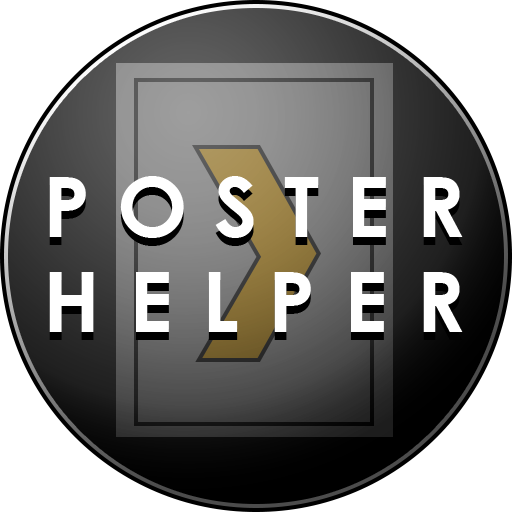
<style>
.page{position:relative;width:512px;height:512px;background:#ffffff}
.page>*{position:absolute;margin:0}
.t1{font:84.4px "CenturyGothic-Bold";letter-spacing:0.38em;color:#ffffff}
</style>
<div class="page">
<p class="t1" style="left:49px;top:176px;width:414px;height:62px">POSTER</p>
<p class="t1" style="left:49px;top:272px;width:414px;height:60px">HELPER</p>
</div>
